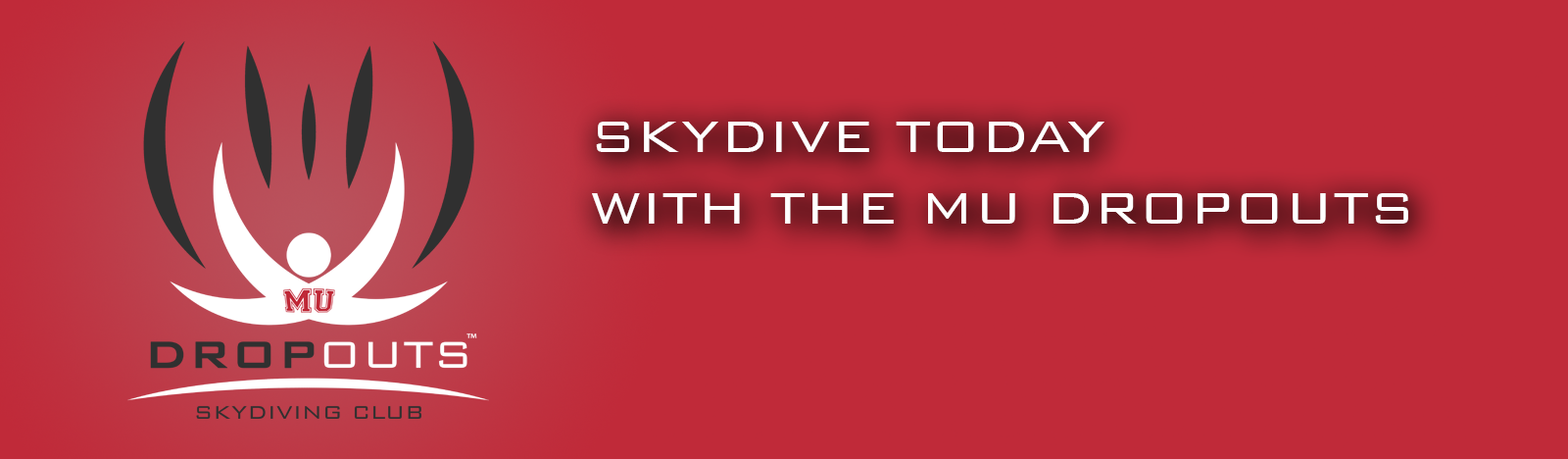
<style>
.page{position:relative;width:1568px;height:459px;background:#c02a39}
.page>*{position:absolute;margin:0}
.t1{font:59.8px "BankGothicBT-Light";color:#ffffff}
</style>
<div class="page">
<p class="t1" style="left:592px;top:122px;width:816px;height:101px">SKYDIVE TODAY<br>WITH THE MU DROPOUTS</p>
</div>
